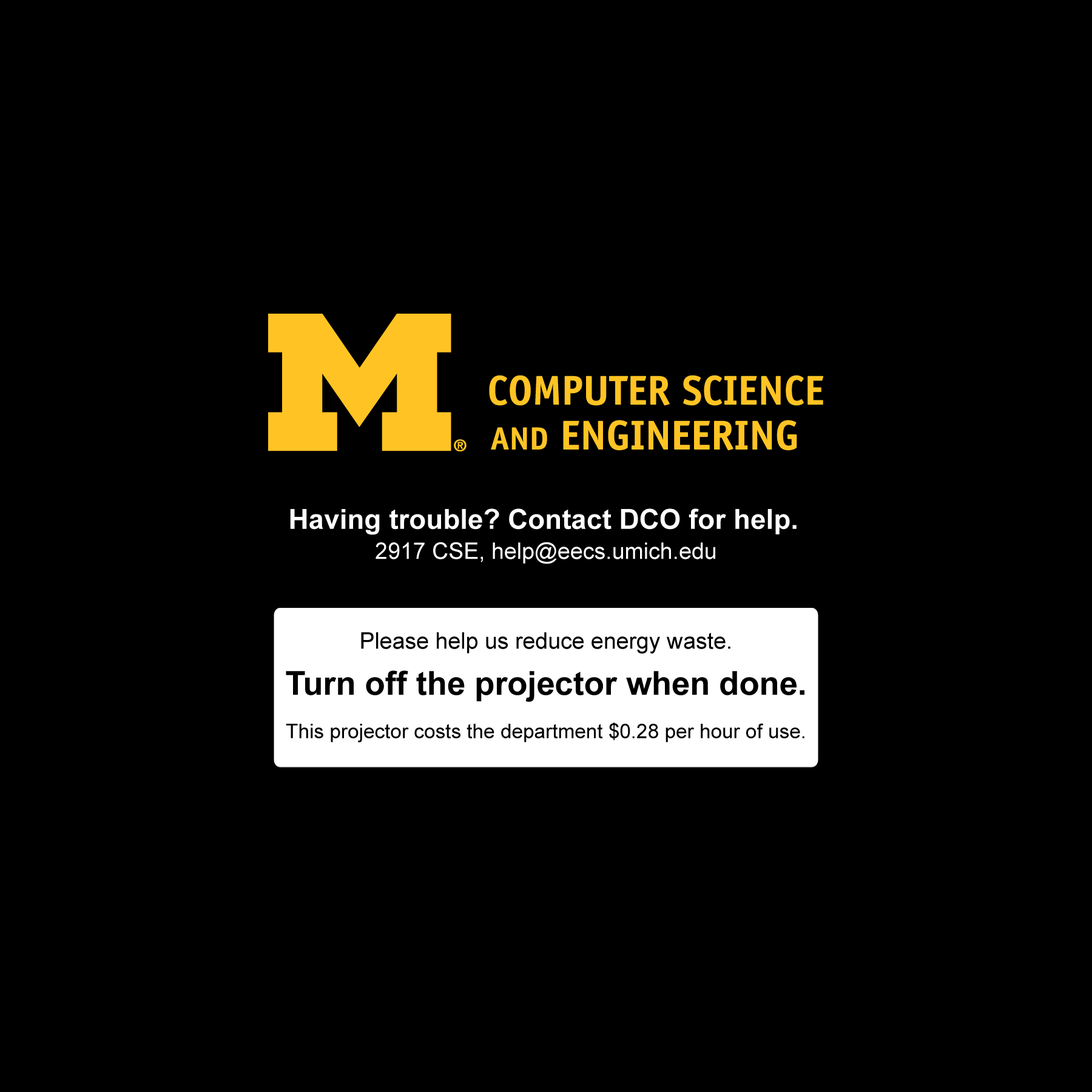
<style>
.page{position:relative;width:1092px;height:1092px;background:#000000}
.page>*{position:absolute;margin:0}
.t1{font:27.8px "Arial-BoldMT";color:#ffffff}
.t2{font:22.7px "ArialMT";color:#ffffff}
.t3{font:22.7px "ArialMT";color:#000000}
.t4{font:32.9px "Arial-BoldMT";color:#000000}
.t5{font:20.2px "ArialMT";color:#000000}
</style>
<div class="page">
<p class="t1" style="left:290px;top:508px;width:507px;height:27px">Having trouble? Contact DCO for help.</p>
<p class="t2" style="left:376px;top:542px;width:339px;height:22px">2917 CSE, help@eecs.umich.edu</p>
<p class="t3" style="left:361px;top:632px;width:369px;height:22px">Please help us reduce energy waste.</p>
<p class="t4" style="left:286px;top:670px;width:518px;height:32px">Turn off the projector when done.</p>
<p class="t5" style="left:286px;top:723px;width:518px;height:20px">This projector costs the department $0.28 per hour of use.</p>
</div>
